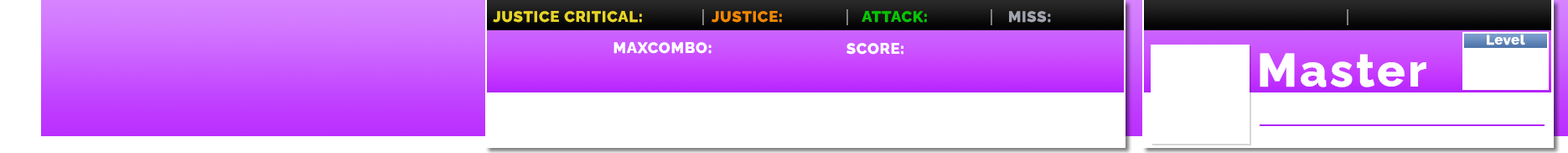
<style>
.page{position:relative;width:1568px;height:153px;background:#ffffff}
.page>*{position:absolute;margin:0}
.t1{font:14.9px "RalewayRoman-ExtraBold";letter-spacing:0.06em;color:#e7d527}
.t2{font:14.9px "RalewayRoman-ExtraBold";letter-spacing:0.06em;color:#ef8702}
.t3{font:14.9px "RalewayRoman-ExtraBold";letter-spacing:0.06em;color:#08c304}
.t4{font:14.9px "RalewayRoman-ExtraBold";letter-spacing:0.06em;color:#a1a3ae}
.t5{font:14.9px "RalewayRoman-ExtraBold";letter-spacing:0.06em;color:#ffffff}
.t6{font:13.4px "RalewayRoman-ExtraBold";letter-spacing:0.06em;color:#ffffff}
.t7{font:46.7px "RalewayRoman-ExtraBold";letter-spacing:0.06em;color:#ffffff}
</style>
<div class="page">
<p class="t1" style="left:493px;top:11px;width:149px;height:12px">JUSTICE CRITICAL:</p>
<p class="t2" style="left:712px;top:11px;width:70px;height:12px">JUSTICE:</p>
<p class="t3" style="left:862px;top:11px;width:65px;height:12px">ATTACK:</p>
<p class="t4" style="left:1009px;top:11px;width:42px;height:12px">MISS:</p>
<p class="t5" style="left:613px;top:42px;width:99px;height:12px">MAXCOMBO:</p>
<p class="t6" style="left:1487px;top:34px;width:38px;height:11px">Level</p>
<p class="t5" style="left:846px;top:43px;width:57px;height:11px">SCORE:</p>
<p class="t7" style="left:1260px;top:53px;width:166px;height:34px">Master</p>
</div>
